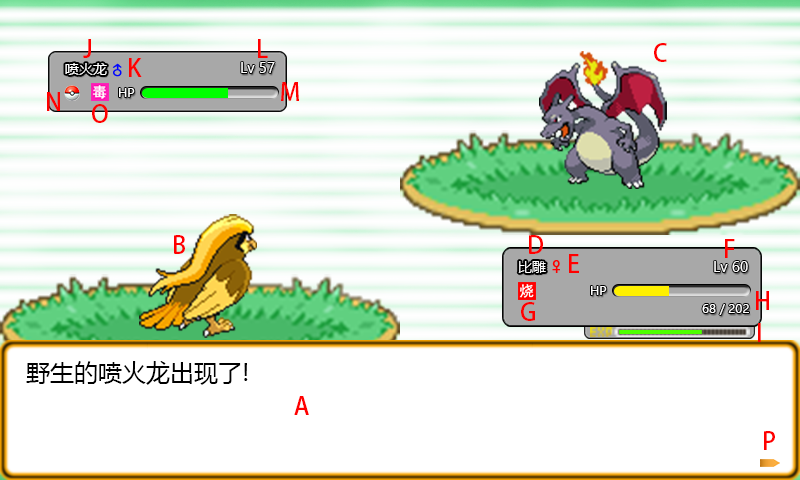
<style>
.page{position:relative;width:800px;height:480px;background:#ffffff}
.page>*{position:absolute;margin:0}
.t1{font:24px "AdobeHeitiStd-Regular";color:#ff0000}
.t2{font:14px "MicrosoftYaHeiUI";color:#ffffff}
.t3{font:12px "MicrosoftYaHeiUI";color:#ffffff}
.t4{font:24px "MicrosoftYaHeiUI";color:#000000}
</style>
<div class="page">
<p class="t1" style="left:83px;top:39px;width:8px;height:19px">J</p>
<p class="t1" style="left:258px;top:39px;width:10px;height:19px">L</p>
<p class="t1" style="left:654px;top:43px;width:13px;height:19px">C</p>
<p class="t2" style="left:65px;top:63px;width:42px;height:12px">喷火龙</p>
<p class="t1" style="left:129px;top:58px;width:13px;height:19px">K</p>
<p class="t2" style="left:241px;top:62px;width:34px;height:11px">Lv 57</p>
<p class="t3" style="left:119px;top:88px;width:16px;height:9px">HP</p>
<p class="t1" style="left:281px;top:82px;width:18px;height:19px">M</p>
<p class="t1" style="left:47px;top:92px;width:13px;height:19px">N</p>
<p class="t1" style="left:92px;top:104px;width:16px;height:19px">O</p>
<p class="t1" style="left:174px;top:235px;width:11px;height:19px">B</p>
<p class="t1" style="left:529px;top:235px;width:14px;height:19px">D</p>
<p class="t1" style="left:725px;top:239px;width:10px;height:19px">F</p>
<p class="t1" style="left:569px;top:254px;width:10px;height:19px">E</p>
<p class="t2" style="left:518px;top:261px;width:28px;height:12px">比雕</p>
<p class="t2" style="left:714px;top:261px;width:34px;height:11px">Lv 60</p>
<p class="t3" style="left:591px;top:286px;width:16px;height:9px">HP</p>
<p class="t1" style="left:756px;top:291px;width:13px;height:19px">H</p>
<p class="t1" style="left:521px;top:302px;width:14px;height:19px">G</p>
<p class="t3" style="left:702px;top:304px;width:47px;height:11px">68 / 202</p>
<p class="t1" style="left:758px;top:323px;width:3px;height:19px">I</p>
<p class="t4" style="left:26px;top:361px;width:222px;height:24px">野生的喷火龙出现了!</p>
<p class="t1" style="left:294px;top:396px;width:15px;height:19px">A</p>
<p class="t1" style="left:764px;top:431px;width:11px;height:19px">P</p>
</div>
